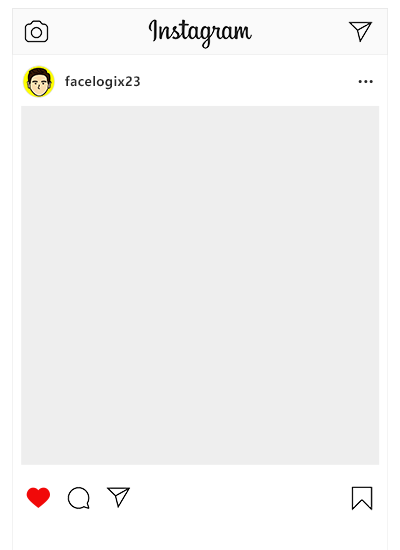
<style>
.page{position:relative;width:400px;height:550px;background:#eeeeee}
.page>*{position:absolute;margin:0}
.t1{font:13.3px "MalgunGothicBold";letter-spacing:0.025em;color:#262626}
</style>
<div class="page">
<p class="t1" style="left:65px;top:75px;width:75px;height:15px">facelogix23</p>
</div>
